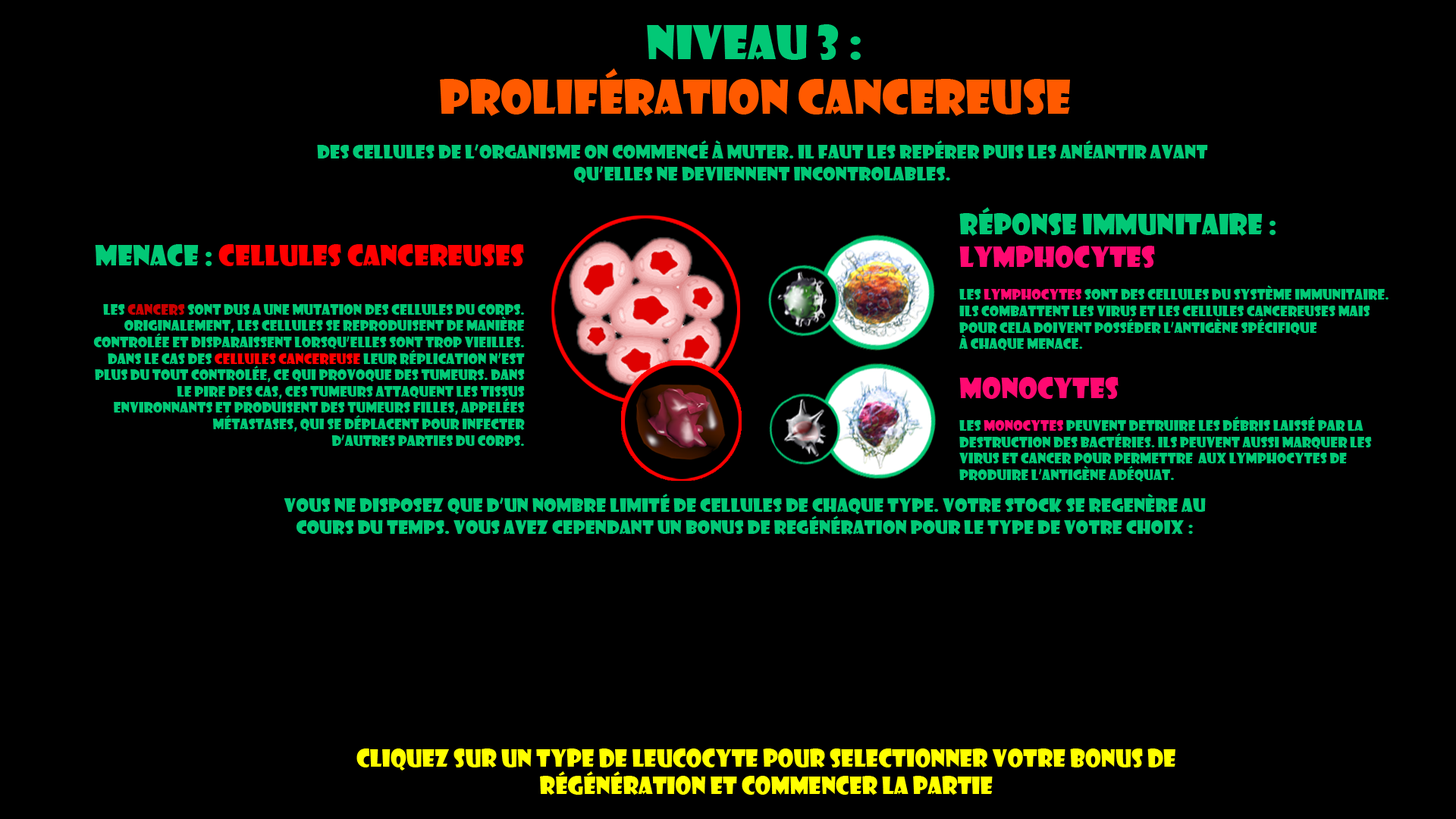
<style>
.page{position:relative;width:1456px;height:819px;background:#000000}
.page>*{position:absolute;margin:0}
.t1{font:45.5px "ShowcardGothic-Reg";color:#ff5a00}
.t2{font:45.5px "ShowcardGothic-Reg";color:#02c876}
.t3{font:18.2px "ShowcardGothic-Reg";color:#02c876}
.t4{font:13.6px "ShowcardGothic-Reg";color:#02c876}
.t5{font:27.3px "ShowcardGothic-Reg";color:#02c876}
.t6{font:27.3px "ShowcardGothic-Reg";color:#ff0971}
.t7{font:13.6px "ShowcardGothic-Reg";color:#ff0971}
.t8{font:27.3px "ShowcardGothic-Reg";color:#ff0000}
.t9{font:13.6px "ShowcardGothic-Reg";color:#c80000}
.t10{font:13.6px "ShowcardGothic-Reg";color:#ff0000}
.t11{font:22.7px "ShowcardGothic-Reg";color:#ffff00}
</style>
<div class="page">
<p class="t1" style="left:440px;top:24px;width:630px;height:92px;text-align:center"><span class="t2">Niveau 3 : <br></span>Prolifération cancereuse</p>
<p class="t3" style="left:317px;top:140px;width:891px;height:43px;text-align:center">DES CELLULES DE L’organisme on commencé à muter. IL faut les repérer puis les anéantir avant qu’elles ne deviennent incontrolables.</p>
<p class="t4" style="left:959px;top:207px;width:429px;height:275px"><span class="t5">Réponse immunitaire :<br></span><span class="t6">LYMPHOCYTES<br></span><br>Les <span class="t7">LYMPHOCYTES </span>SONT DES CELLULES DU SYSTème immunitaire. Ils combattent les virus et les cellules cancereuses mais pour cela doivent posséder l’antigène spécifique <br>à chaque menace.<br><br><span class="t6">Monocytes<br></span><br>Les <span class="t7">monocytes </span>peuvent detruire les débris laissé par la <br>destruction des bactéries. Ils peuvent aussi marquer les virus et cancer pour permettre  aux lymphocytes de <br>produire l’antigène adéquat.</p>
<p class="t4" style="left:93px;top:244px;width:432px;height:203px;text-align:right"><span class="t5">Menace : </span><span class="t8">CEllules cancereuses<br><br></span>Les <span class="t9">cancers </span>sont dus a une mutation des cellules du corps.<br>Originalement, les cellules se reproduisent de manière controlée et disparaissent lorsqu’elles sont trop vieilles. Dans le cas des <span class="t10">cellules cancereuse</span> leur réplication n’est plus du tout controlée, ce qui provoque des tumeurs. Dans le pire des cas, ces tumeurs attaquent les tissus <br>environnants et produisent des tumeurs filles, appelées métastases, qui se déplacent pour infecter <br>d’autres parties du corps.</p>
<p class="t3" style="left:284px;top:494px;width:922px;height:41px;text-align:center">VOUS NE DISPOSEZ QUE D’un nombre limité de cellules de chaque type. Votre stock se regenère au cours du temps. Vous avez cependant un bonus de regénération pour le type de votre choix :</p>
<p class="t11" style="left:356px;top:748px;width:819px;height:47px;text-align:center">CLIQUEZ SUR UN TYPE DE LEUCOCYTE POUR SELECTIONNER VOTRE BONUS DE <br>Régénération et commencer la partie</p>
</div>
